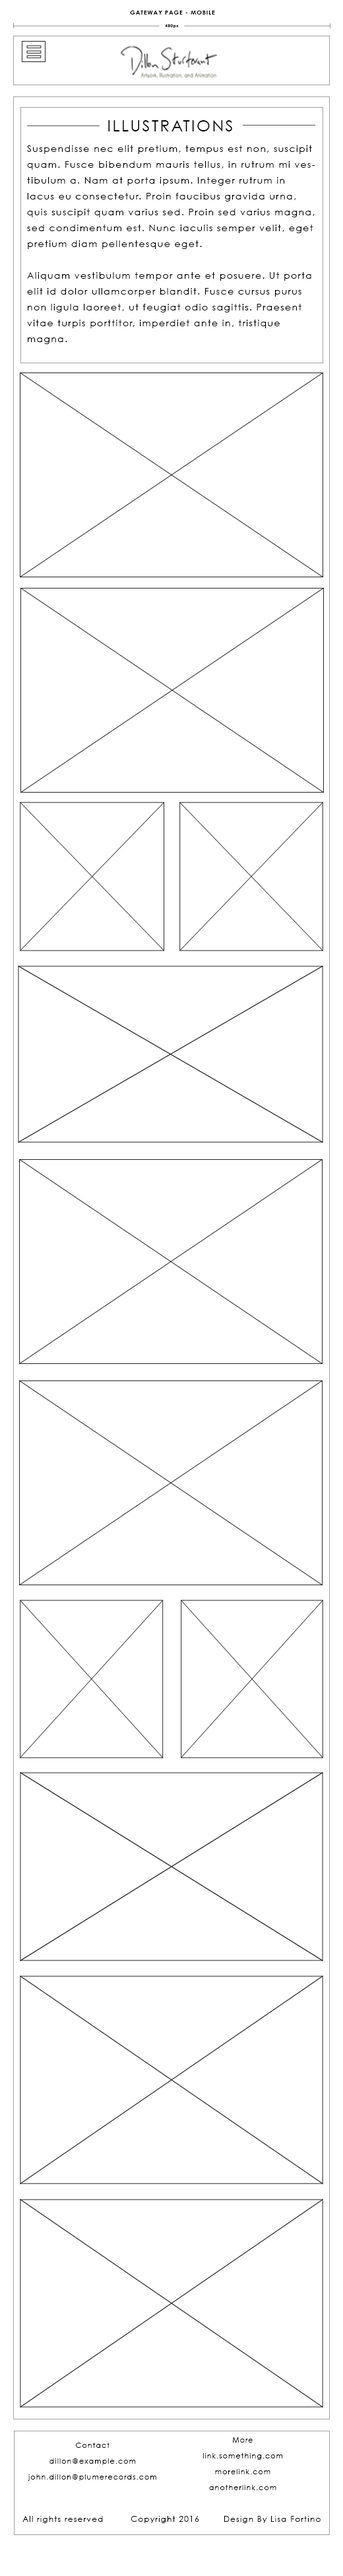
<style>
.page{position:relative;width:343px;height:2576px;background:#ffffff}
.page>*{position:absolute;margin:0}
.t1{font:5.8px "CenturyGothic-Bold";letter-spacing:0.1em;color:#020202}
.t2{font:3.9px "CenturyGothic-Bold";letter-spacing:0.1em}
.t3{font:15.9px "CenturyGothic";letter-spacing:0.1em;color:#020202}
.t4{font:9.2px/15.9px "CenturyGothic";letter-spacing:0.1em;color:#020202}
.t5{font:7.3px/15.9px "CenturyGothic";letter-spacing:0.1em;color:#020202}
.t6{font:7.9px "CenturyGothic";letter-spacing:0.1em;color:#020202}
</style>
<div class="page">
<p class="t1" style="left:130px;top:11px;width:85px;height:4px">GATEWAY PAGE - MOBILE</p>
<p class="t2" style="left:165px;top:24px;width:14px;height:4px">480px</p>
<p class="t3" style="left:108px;top:120px;width:125px;height:11px">ILLUSTRATIONS</p>
<p class="t4" style="left:27px;top:145px;width:289px;height:199px">Suspendisse nec elit pretium, tempus est non, suscipit quam. Fusce bibendum mauris tellus, in rutrum mi vestibulum a. Nam at porta ipsum. Integer rutrum in lacus eu consectetur. Proin faucibus gravida urna, quis suscipit quam varius sed. Proin sed varius magna, sed condimentum est. Nunc iaculis semper velit, eget pretium diam pellentesque eget.<br><br>Aliquam vestibulum tempor ante et posuere. Ut porta elit id dolor ullamcorper blandit. Fusce cursus purus non ligula laoreet, ut feugiat odio sagittis. Praesent vitae turpis porttitor, imperdiet ante in, tristique magna.</p>
<p class="t5" style="left:203px;top:2437px;width:80px;height:53px;text-align:center">More<br>link.something.com<br>morelink.com<br>anotherlink.com</p>
<p class="t5" style="left:28px;top:2443px;width:129px;height:38px;text-align:center">Contact<br>dillon@example.com<br>john.dillon@plumerecords.com</p>
<p class="t6" style="left:22px;top:2516px;width:299px;height:7px">All rights reserved         Copyright 2016        Design By Lisa Fortino</p>
</div>
